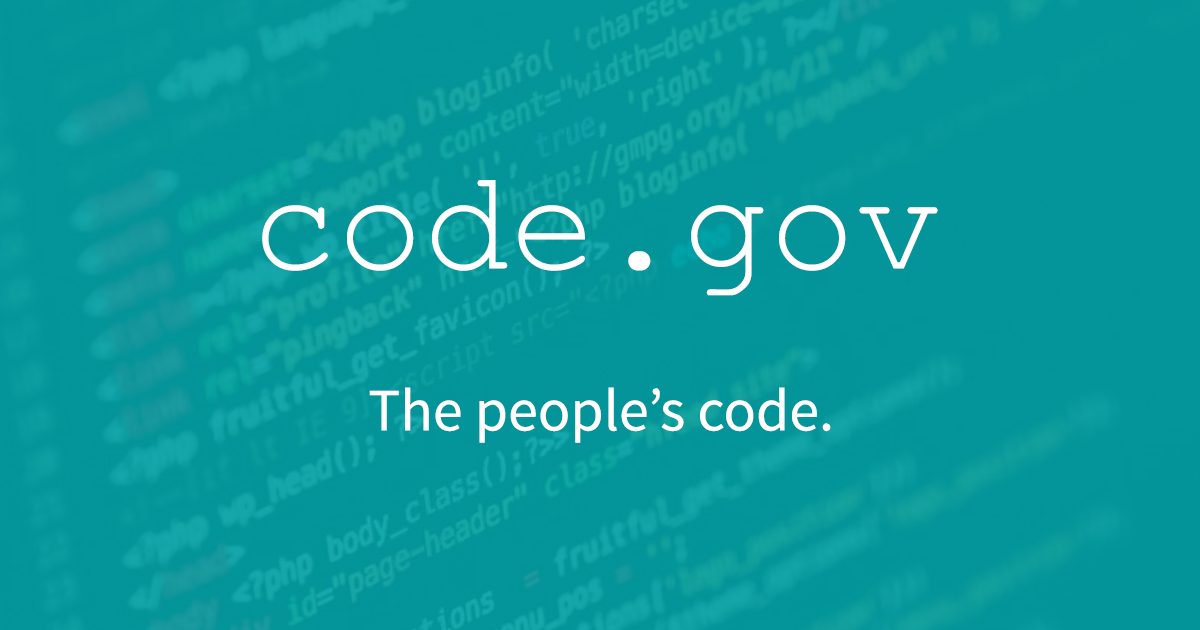
<style>
.page{position:relative;width:1200px;height:630px;background:#039599}
.page>*{position:absolute;margin:0}
.t1{font:144px "CourierNewPSMT";color:#ffffff}
.t2{font:60px "SourceSansPro-Regular";color:#ffffff}
</style>
<div class="page">
<p class="t1" style="left:262px;top:180px;width:676px;height:116px">code.gov</p>
<p class="t2" style="left:369px;top:387px;width:462px;height:56px">The people’s code.</p>
</div>
